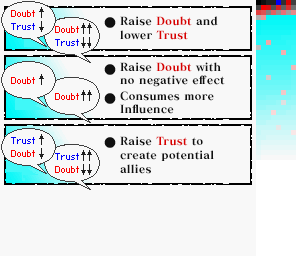
<style>
.page{position:relative;width:296px;height:256px;background:#f8f8f8}
.page>*{position:absolute;margin:0}
.t1{font:11px/14px "MatissePro-EB";letter-spacing:0.01em;color:#101010}
.t2{font:11px/14px "MatissePro-EB";letter-spacing:0.01em;color:#d80000}
.t3{font:11px/13px "MatissePro-EB";letter-spacing:0.01em;color:#101010}
.t4{font:11px/13px "MatissePro-EB";letter-spacing:0.01em;color:#d80000}
.t5{font:11px/16px "MatissePro-EB";letter-spacing:0.01em;color:#101010}
</style>
<div class="page">
<p class="t1" style="left:120px;top:16px;width:98px;height:24px">Raise <span class="t2">Doubt</span> and<br>lower <span class="t2">Trust</span></p>
<p class="t3" style="left:120px;top:62px;width:105px;height:52px">Raise <span class="t4">Doubt </span>with<br>no negative effect<br><span class="t5">Consumes more<br></span>Influence</p>
<p class="t1" style="left:120px;top:136px;width:94px;height:38px">Raise <span class="t2">Trust</span> to<br>create potential<br>allies</p>
</div>
